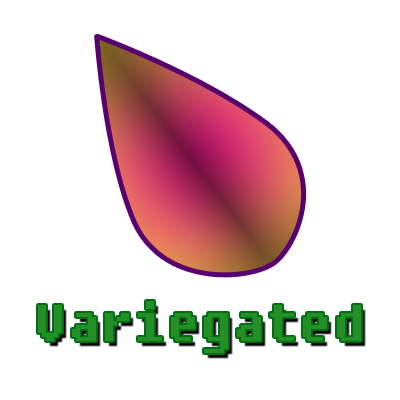
<style>
.page{position:relative;width:400px;height:400px;background:#ffffff}
.page>*{position:absolute;margin:0}
.t1{font:53px "Fixedsys";color:#248e27}
</style>
<div class="page">
<p class="t1" style="left:38px;top:301px;width:323px;height:52px">Variegated</p>
</div>
